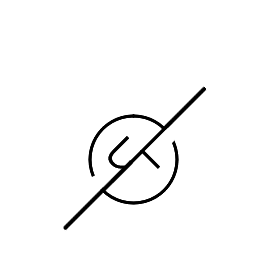
<style>
.page{position:relative;width:280px;height:280px;background:#ffffff}
.page>*{position:absolute;margin:0}
.t1{font:80px "Microsoft-Yi-Baiti";color:#000000}
</style>
<div class="page">
<p class="t1" style="left:140px;top:121px;width:33px;height:48px;rotate:45deg">L</p>
<p class="t1" style="left:140px;top:121px;width:33px;height:48px;rotate:45deg">L</p>
<p class="t1" style="left:108px;top:136px;width:36px;height:47px;rotate:-135deg">h</p>
<p class="t1" style="left:108px;top:136px;width:36px;height:47px;rotate:-135deg">h</p>
</div>
